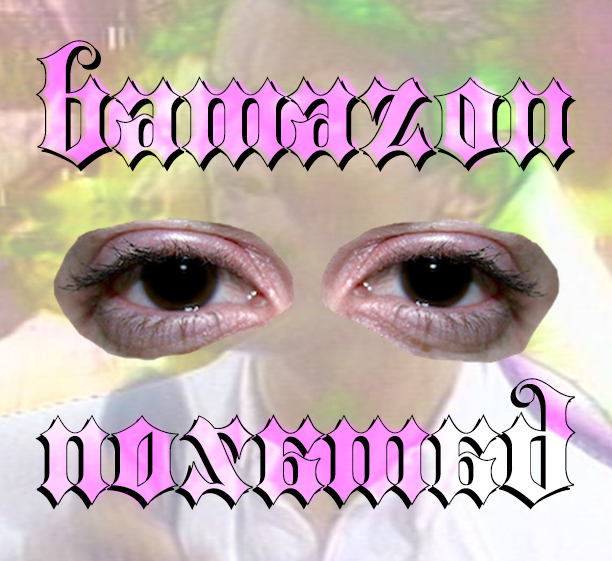
<style>
.page{position:relative;width:612px;height:561px}
.page>*{position:absolute;margin:0}
.t1{font:156px "Blackletter-Shadow";letter-spacing:0.01em;color:#000000}
</style>
<div class="page">
<p class="t1" style="left:35px;top:40px;width:541px;height:132px">bamazon</p>
<p class="t1" style="left:35px;top:378px;width:541px;height:132px;rotate:180deg">bamazon</p>
</div>
